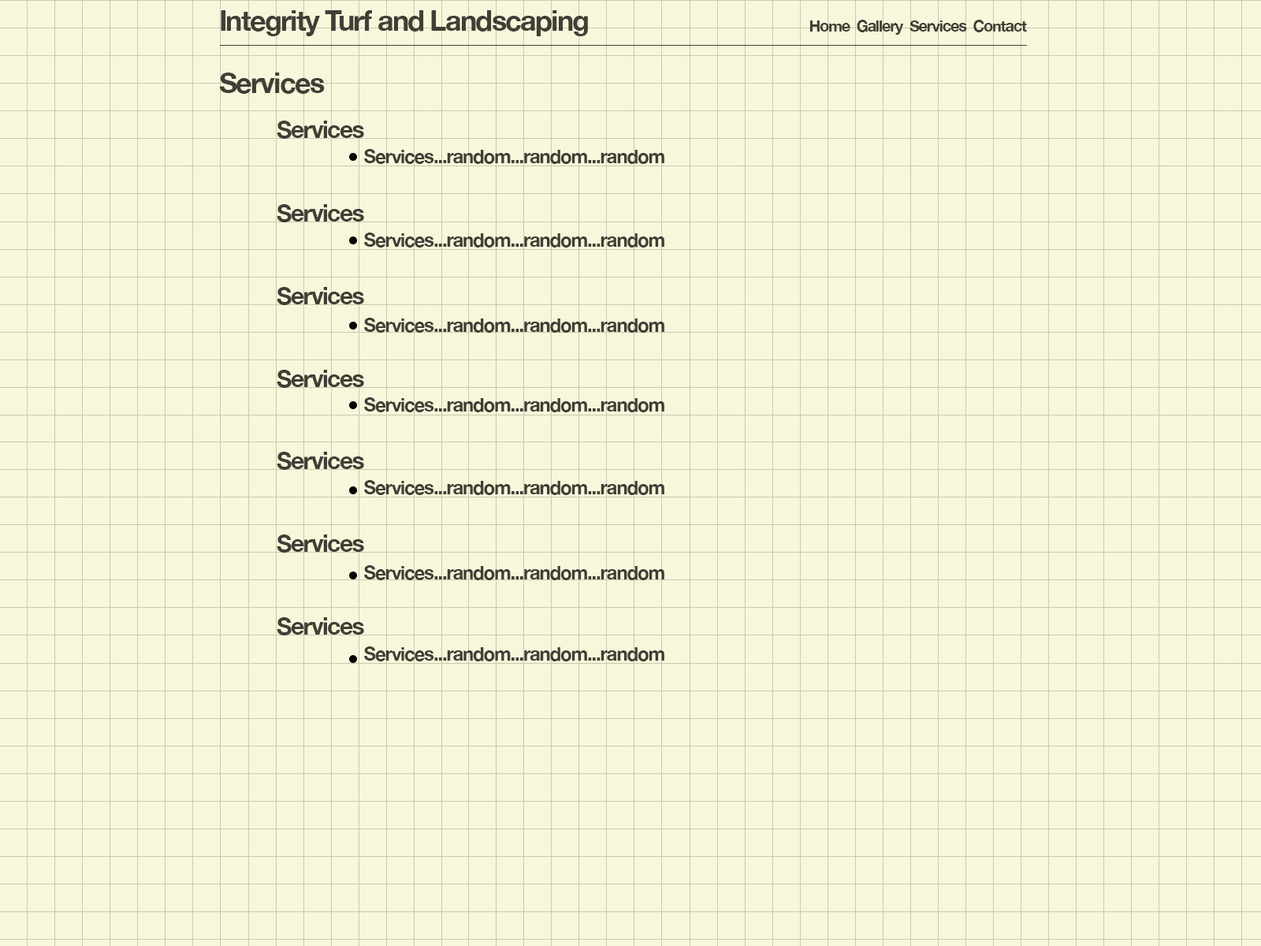
<style>
.page{position:relative;width:1261px;height:946px;background:#f8f7db}
.page>*{position:absolute;margin:0}
.t1{font:28.4px "HelveticaNeue-Bold";letter-spacing:-0.05em;color:#403f36}
.t2{font:15.4px "HelveticaNeue-Bold";letter-spacing:-0.05em;color:#403f36}
.t3{font:23.6px "HelveticaNeue-Bold";letter-spacing:-0.05em;color:#403f36}
.t4{font:18.9px "HelveticaNeue-Bold";letter-spacing:-0.05em;color:#403f36}
</style>
<div class="page">
<p class="t1" style="left:221px;top:10px;width:367px;height:26px">Integrity Turf and Landscaping</p>
<p class="t2" style="left:809px;top:20px;width:218px;height:15px">Home  Gallery  Services  Contact</p>
<p class="t1" style="left:219px;top:73px;width:106px;height:21px">Services</p>
<p class="t3" style="left:277px;top:121px;width:87px;height:18px">Services</p>
<p class="t4" style="left:364px;top:149px;width:300px;height:15px">Services...random...random...random</p>
<p class="t3" style="left:277px;top:204px;width:87px;height:18px">Services</p>
<p class="t4" style="left:364px;top:232px;width:300px;height:15px">Services...random...random...random</p>
<p class="t3" style="left:277px;top:287px;width:87px;height:18px">Services</p>
<p class="t4" style="left:364px;top:318px;width:300px;height:15px">Services...random...random...random</p>
<p class="t3" style="left:277px;top:370px;width:87px;height:18px">Services</p>
<p class="t4" style="left:364px;top:397px;width:300px;height:15px">Services...random...random...random</p>
<p class="t3" style="left:277px;top:452px;width:87px;height:18px">Services</p>
<p class="t4" style="left:364px;top:480px;width:300px;height:15px">Services...random...random...random</p>
<p class="t3" style="left:277px;top:534px;width:87px;height:18px">Services</p>
<p class="t4" style="left:364px;top:565px;width:300px;height:15px">Services...random...random...random</p>
<p class="t3" style="left:277px;top:617px;width:87px;height:18px">Services</p>
<p class="t4" style="left:364px;top:646px;width:300px;height:15px">Services...random...random...random</p>
</div>
